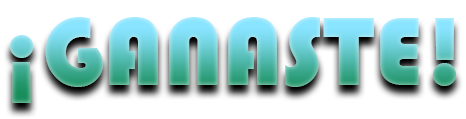
<style>
.page{position:relative;width:466px;height:119px;background:#ffffff}
.page>*{position:absolute;margin:0}
.t1{font:100px "Bauhaus93"}
</style>
<div class="page">
<p class="t1" style="left:10px;top:17px;width:447px;height:86px">¡GANASTE!</p>
</div>
